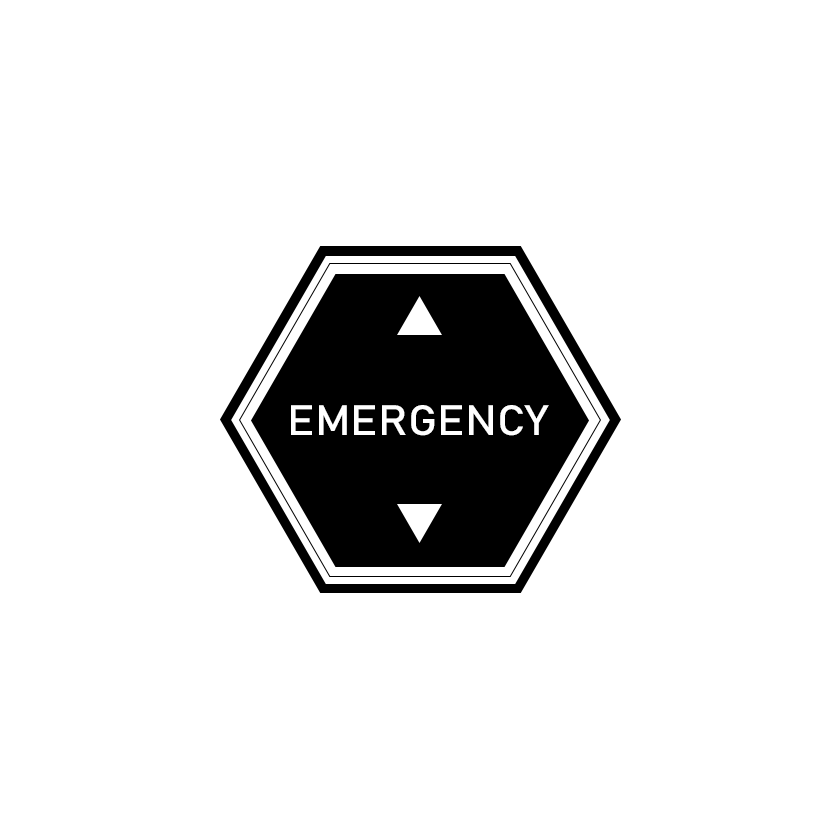
<style>
.page{position:relative;width:840px;height:840px;background:#ffffff}
.page>*{position:absolute;margin:0}
.t1{font:41.7px "Bahnschrift";color:#ffffff;scale:1.1 1}
</style>
<div class="page">
<p class="t1" style="left:291px;top:405px;width:258px;height:31px">EMERGENCY</p>
</div>
